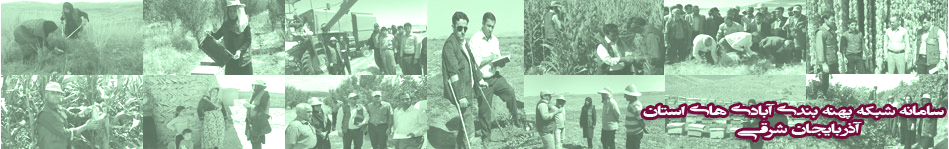
<style>
.page{position:relative;width:949px;height:149px}
.page>*{position:absolute;margin:0}
.t1{font:15px "BZarBold-_-Edit-for-Poster-Design";color:#f8fafc;scale:1.58 1}
</style>
<div class="page">
<p class="t1" style="left:643px;top:103px;width:301px;height:37px;text-align:center">سامانه شبکه پهنه بندي آبادي هاي استان   <br>آذربايجان شرقي</p>
</div>
